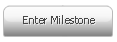
<style>
.page{position:relative;width:117px;height:42px;background:#ffffff}
.page>*{position:absolute;margin:0}
.t1{font:11px "Tahoma";color:#464646}
</style>
<div class="page">
<p class="t1" style="left:23px;top:15px;width:72px;height:9px">Enter Milestone</p>
</div>
